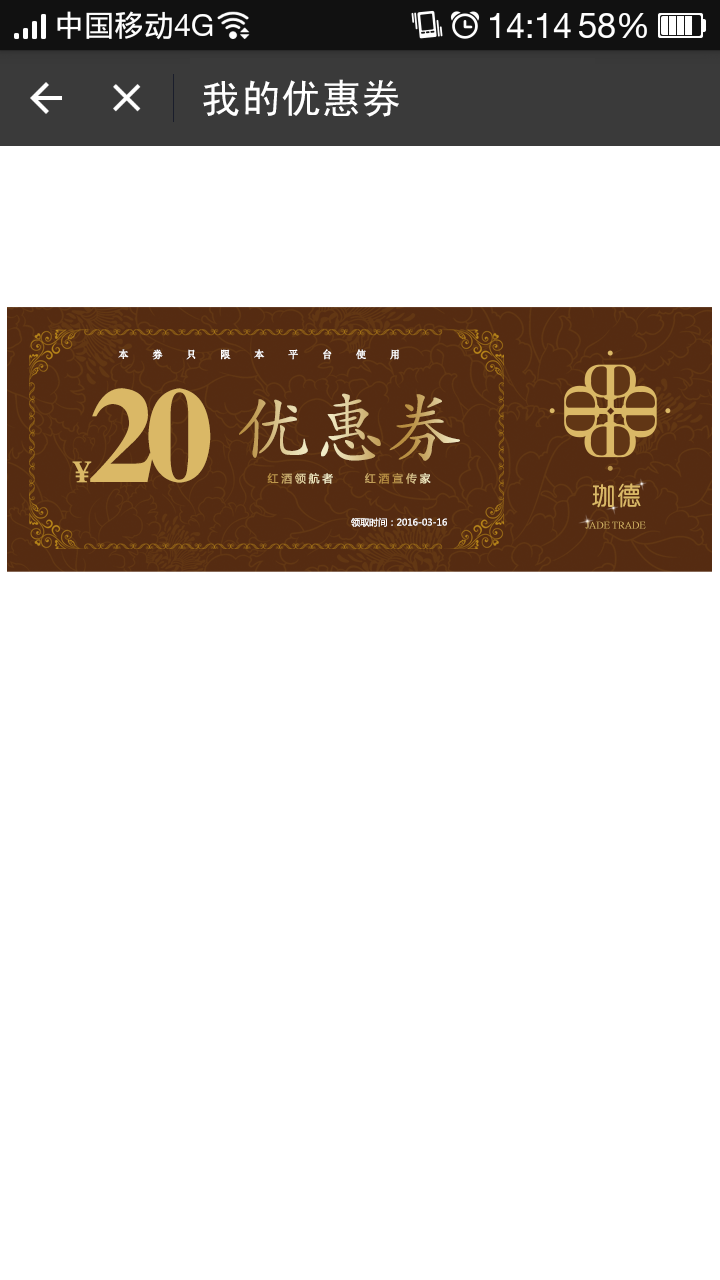
<style>
.page{position:relative;width:720px;height:1280px;background:#ffffff}
.page>*{position:absolute;margin:0}
.t1{font:40px "SimHei";color:#ffffff}
.t2{font:10.3px "FZSHJW--GB1-0";letter-spacing:2.3em;color:#ffffff}
.t3{font:136px "FZXBSFW--GB1-0";letter-spacing:-0.08em;color:#dab866}
.t4{font:74.6px "FZKTJW--GB1-0"}
.t5{font:30.4px "FZXBSFW--GB1-0";letter-spacing:-0.08em;color:#dab866}
.t6{font:10.7px "MicrosoftYaHei";letter-spacing:0.28em}
.t7{font:26.1px "CTZhongYuanSJ";color:#dab866}
.t8{font:9.1px "MicrosoftYaHei";color:#ffffff}
.t9{font:10px "CTWeiBeiSJ";color:#dab866}
</style>
<div class="page">
<p class="t1" style="left:203px;top:79px;width:196px;height:38px">我的优惠券</p>
<p class="t2" style="left:118px;top:349px;width:281px;height:11px">本券只限本平台使用</p>
<p class="t3" style="left:90px;top:388px;width:121px;height:95px">20</p>
<p class="t4" style="left:239px;top:393px;width:221px;height:68px">优惠券</p>
<p class="t5" style="left:72px;top:461px;width:20px;height:22px">￥</p>
<p class="t6" style="left:267px;top:473px;width:164px;height:11px">红酒领航者     红酒宣传家</p>
<p class="t7" style="left:592px;top:483px;width:49px;height:25px">珈德</p>
<p class="t8" style="left:351px;top:517px;width:96px;height:10px">领取时间：2016-03-16</p>
<p class="t9" style="left:585px;top:521px;width:61px;height:8px">JADE TRADE</p>
</div>
